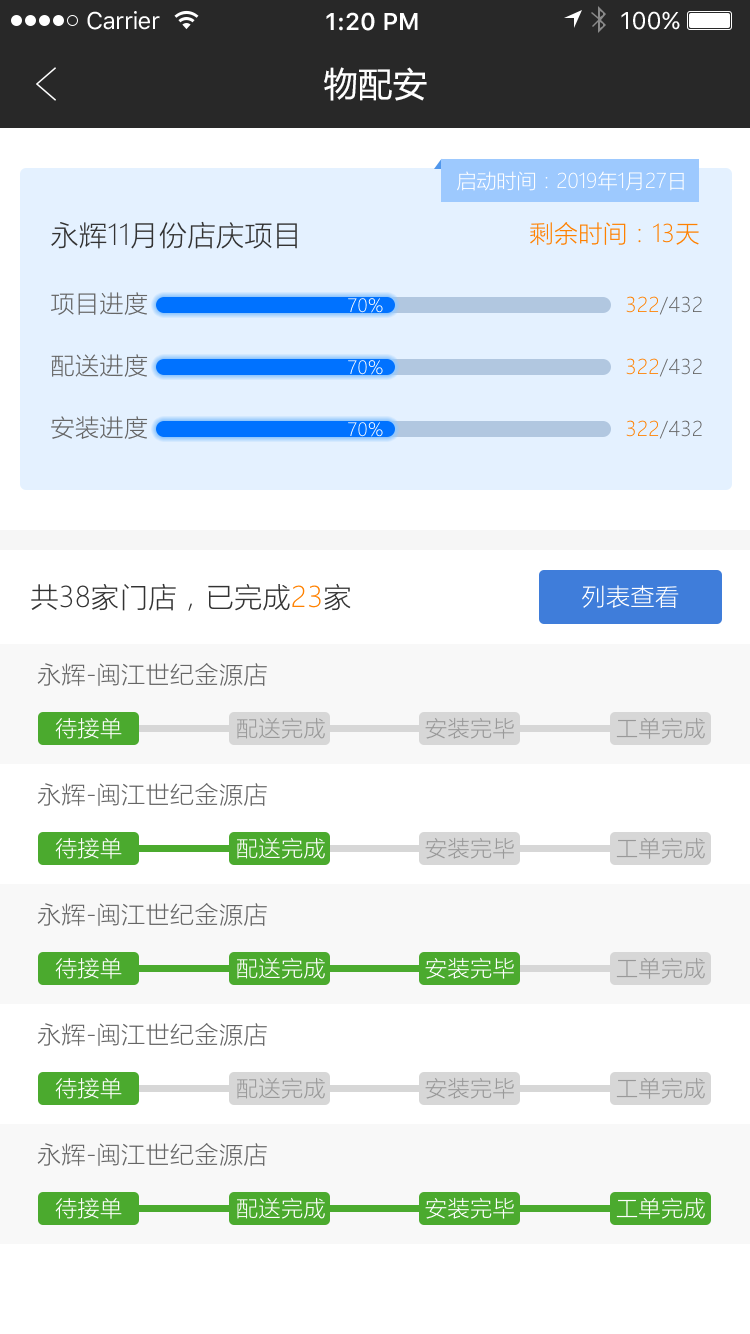
<style>
.page{position:relative;width:750px;height:1334px;background:#ffffff}
.page>*{position:absolute;margin:0}
.t1{font:24px "SFUIText-Regular";letter-spacing:-0.025em;color:#ffffff}
.t2{font:24px "SFUIText-Semibold";color:#ffffff}
.t3{font:24px "SFUIText-Regular";color:#ffffff}
.t4{font:34px "MicrosoftYaHei";letter-spacing:0.02em;color:#ffffff}
.t5{font:20px "MicrosoftYaHeiLight";color:#ffffff}
.t6{font:28px "MicrosoftYaHeiLight";letter-spacing:0.02em;color:#333333}
.t7{font:24px "MicrosoftYaHeiLight";letter-spacing:0.02em;color:#ff8100}
.t8{font:24px "MicrosoftYaHeiLight";letter-spacing:0.02em;color:#666666}
.t9{font:18px "MicrosoftYaHeiLight";letter-spacing:0.02em}
.t10{font:20px "MicrosoftYaHeiLight";letter-spacing:0.02em;color:#666666}
.t11{font:20px "MicrosoftYaHeiLight";letter-spacing:0.02em;color:#ff8100}
.t12{font:28px "MicrosoftYaHeiLight";letter-spacing:0.02em;color:#ff8100}
.t13{font:24px "MicrosoftYaHeiLight";letter-spacing:0.02em;color:#ffffff}
.t14{font:22px "MicrosoftYaHeiLight";letter-spacing:0.02em;color:#ffffff}
.t15{font:22px "MicrosoftYaHeiLight";letter-spacing:0.02em;color:#999999}
</style>
<div class="page">
<p class="t1" style="left:87px;top:11px;width:73px;height:19px">Carrier</p>
<p class="t2" style="left:326px;top:12px;width:92px;height:19px">1:20 PM</p>
<p class="t3" style="left:621px;top:11px;width:59px;height:19px">100%</p>
<p class="t4" style="left:324px;top:67px;width:103px;height:34px">物配安</p>
<p class="t5" style="left:457px;top:171px;width:227px;height:20px">启动时间：2019年1月27日</p>
<p class="t6" style="left:51px;top:221px;width:246px;height:28px">永辉11月份店庆项目</p>
<p class="t7" style="left:530px;top:222px;width:169px;height:23px">剩余时间：13天</p>
<p class="t8" style="left:51px;top:292px;width:97px;height:23px">项目进度</p>
<p class="t9" style="left:348px;top:298px;width:35px;height:15px">70%</p>
<p class="t10" style="left:626px;top:296px;width:76px;height:19px"><span class="t11">322</span>/432</p>
<p class="t8" style="left:51px;top:354px;width:97px;height:23px">配送进度</p>
<p class="t9" style="left:348px;top:360px;width:35px;height:15px">70%</p>
<p class="t10" style="left:626px;top:358px;width:76px;height:19px"><span class="t11">322</span>/432</p>
<p class="t8" style="left:51px;top:416px;width:97px;height:23px">安装进度</p>
<p class="t9" style="left:348px;top:422px;width:35px;height:15px">70%</p>
<p class="t10" style="left:626px;top:420px;width:76px;height:19px"><span class="t11">322</span>/432</p>
<p class="t6" style="left:31px;top:583px;width:320px;height:28px">共38家门店，已完成<span class="t12">23</span>家</p>
<p class="t13" style="left:582px;top:585px;width:97px;height:23px">列表查看</p>
<p class="t8" style="left:37px;top:663px;width:230px;height:23px">永辉-闽江世纪金源店</p>
<p class="t14" style="left:55px;top:718px;width:67px;height:21px">待接单</p>
<p class="t15" style="left:237px;top:717px;width:88px;height:22px">配送完成</p>
<p class="t15" style="left:425px;top:717px;width:89px;height:22px">安装完毕</p>
<p class="t15" style="left:616px;top:717px;width:89px;height:22px">工单完成</p>
<p class="t8" style="left:37px;top:783px;width:230px;height:23px">永辉-闽江世纪金源店</p>
<p class="t14" style="left:55px;top:838px;width:67px;height:21px">待接单</p>
<p class="t14" style="left:237px;top:837px;width:88px;height:22px">配送完成</p>
<p class="t15" style="left:425px;top:837px;width:89px;height:22px">安装完毕</p>
<p class="t15" style="left:616px;top:837px;width:89px;height:22px">工单完成</p>
<p class="t8" style="left:37px;top:903px;width:230px;height:23px">永辉-闽江世纪金源店</p>
<p class="t14" style="left:55px;top:958px;width:67px;height:21px">待接单</p>
<p class="t14" style="left:237px;top:957px;width:88px;height:22px">配送完成</p>
<p class="t14" style="left:425px;top:957px;width:89px;height:22px">安装完毕</p>
<p class="t15" style="left:616px;top:957px;width:89px;height:22px">工单完成</p>
<p class="t8" style="left:37px;top:1023px;width:230px;height:23px">永辉-闽江世纪金源店</p>
<p class="t14" style="left:55px;top:1078px;width:67px;height:21px">待接单</p>
<p class="t15" style="left:237px;top:1077px;width:88px;height:22px">配送完成</p>
<p class="t15" style="left:425px;top:1077px;width:89px;height:22px">安装完毕</p>
<p class="t15" style="left:616px;top:1077px;width:89px;height:22px">工单完成</p>
<p class="t8" style="left:37px;top:1143px;width:230px;height:23px">永辉-闽江世纪金源店</p>
<p class="t14" style="left:55px;top:1198px;width:67px;height:21px">待接单</p>
<p class="t14" style="left:237px;top:1197px;width:88px;height:22px">配送完成</p>
<p class="t14" style="left:425px;top:1197px;width:89px;height:22px">安装完毕</p>
<p class="t14" style="left:616px;top:1197px;width:89px;height:22px">工单完成</p>
</div>
